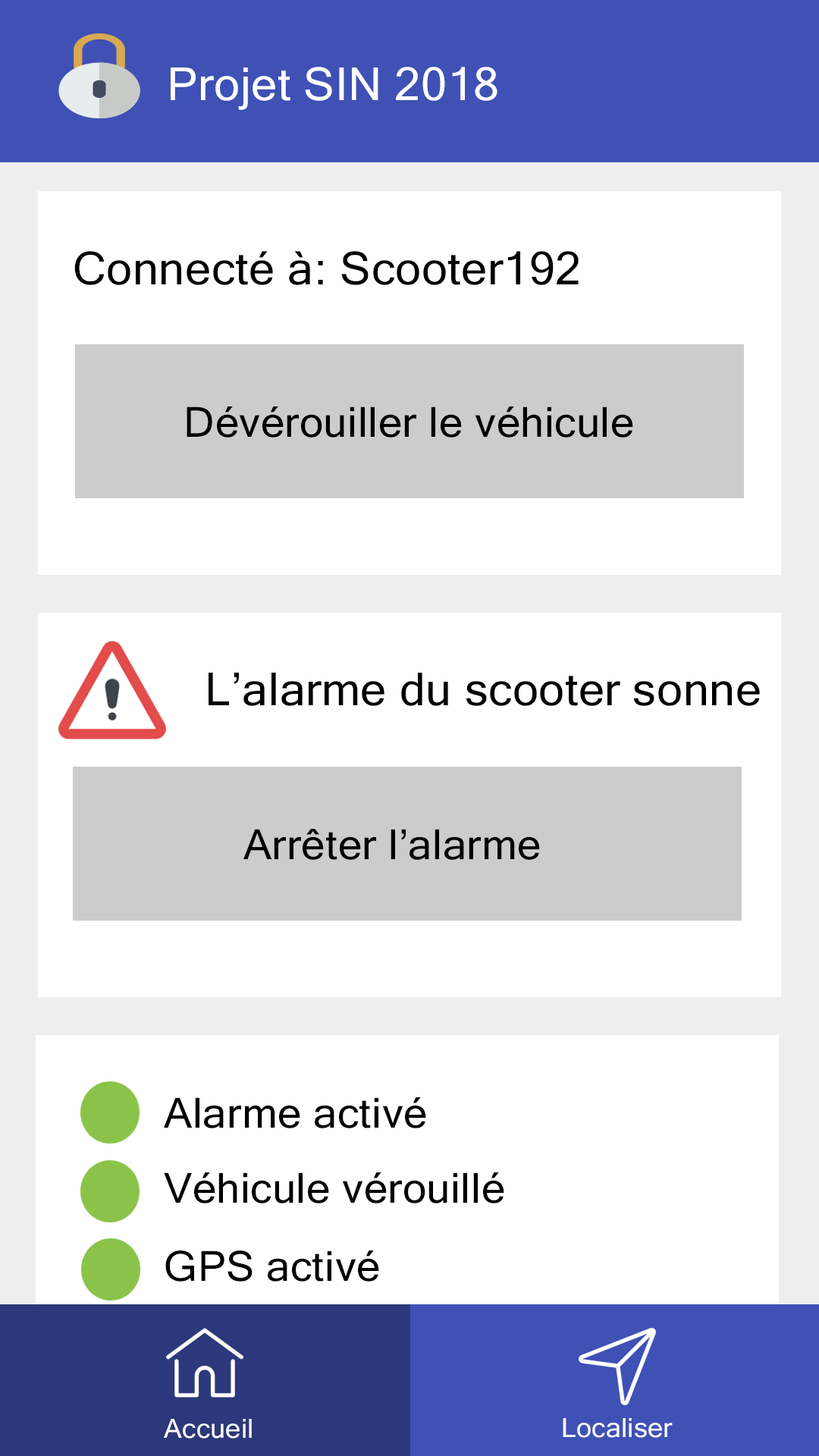
<style>
.page{position:relative;width:819px;height:1456px;background:#ffffff}
.page>*{position:absolute;margin:0}
.t1{font:45.5px "MicrosoftSansSerif";letter-spacing:0.01em;color:#ffffff}
.t2{font:45.5px "MicrosoftSansSerif";letter-spacing:0.01em;color:#000000}
.t3{font:41.7px "MicrosoftSansSerif";letter-spacing:0.01em;color:#000000}
.t4{font:26.5px "MicrosoftSansSerif";letter-spacing:0.01em;color:#ffffff}
</style>
<div class="page">
<p class="t1" style="left:171px;top:67px;width:326px;height:43px">Projet SIN 2018</p>
<p class="t2" style="left:74px;top:251px;width:505px;height:34px">Connecté à: Scooter192</p>
<p class="t3" style="left:187px;top:406px;width:446px;height:32px">Dévérouiller le véhicule</p>
<p class="t2" style="left:209px;top:673px;width:551px;height:33px">L’alarme du scooter sonne</p>
<p class="t3" style="left:243px;top:829px;width:297px;height:31px">Arrêter l’alarme</p>
<p class="t3" style="left:164px;top:1097px;width:262px;height:31px">Alarme activé</p>
<p class="t3" style="left:164px;top:1172px;width:340px;height:31px">Véhicule vérouillé</p>
<p class="t3" style="left:165px;top:1250px;width:214px;height:32px">GPS activé</p>
<p class="t4" style="left:164px;top:1419px;width:88px;height:20px">Accueil</p>
<p class="t4" style="left:563px;top:1418px;width:110px;height:20px">Localiser</p>
</div>
